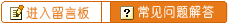
<style>
.page{position:relative;width:230px;height:24px;background:#ffffff}
.page>*{position:absolute;margin:0}
.t1{font:13px "YouYuan";letter-spacing:0.1em;scale:0.9 1}
</style>
<div class="page">
<p class="t1" style="left:26px;top:6px;width:63px;height:13px">进入留言板</p>
<p class="t1" style="left:138px;top:5px;width:76px;height:13px">常见问题解答</p>
</div>
